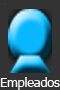
<style>
.page{position:relative;width:60px;height:90px;background:#333333}
.page>*{position:absolute;margin:0}
.t1{font:12.5px "Tahoma";color:#ffffff}
</style>
<div class="page">
<p class="t1" style="left:0px;top:77px;width:60px;height:13px">Empleados</p>
</div>
